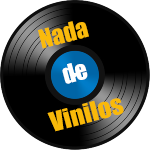
<style>
.page{position:relative;width:150px;height:150px;background:#000000}
.page>*{position:absolute;margin:0}
.t1{font:24px "Impact";color:#faba0b}
.t2{font:24px "Impact";color:#ffffff}
.t3{font:24.7px "Impact";color:#f9b909;scale:1.06 1}
</style>
<div class="page">
<p class="t1" style="left:38px;top:21px;width:51px;height:28px;rotate:-15deg">Nada</p>
<p class="t2" style="left:62px;top:63px;width:26px;height:21px;rotate:-15deg">de</p>
<p class="t3" style="left:47px;top:98px;width:77px;height:34px;rotate:-15deg">Vinilos</p>
</div>
